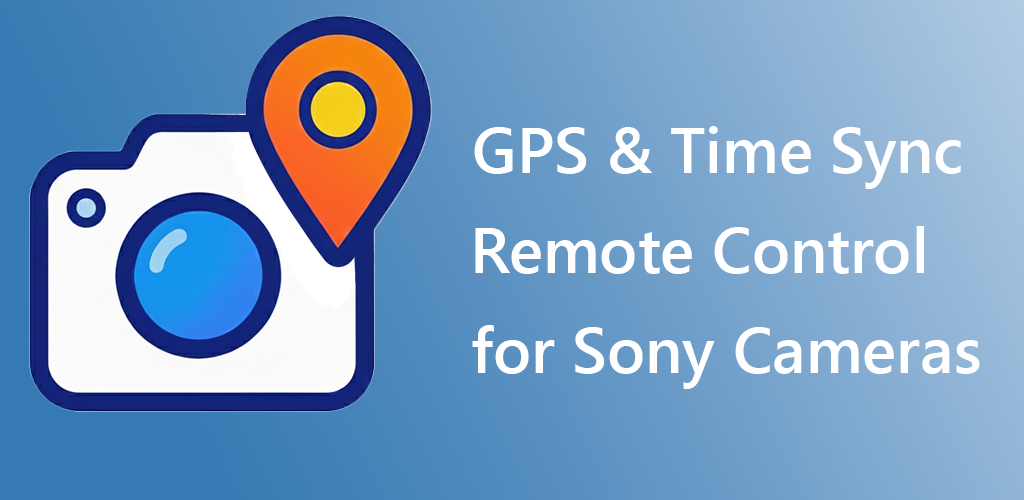
<style>
.page{position:relative;width:1024px;height:500px}
.page>*{position:absolute;margin:0}
.t1{font:64px/100px "SegoeUI-Semibold";color:#ffffff}
</style>
<div class="page">
<p class="t1" style="left:472px;top:126px;width:508px;height:263px;text-align:right">GPS &amp; Time Sync <br>Remote Control   <br>for Sony Cameras</p>
</div>
